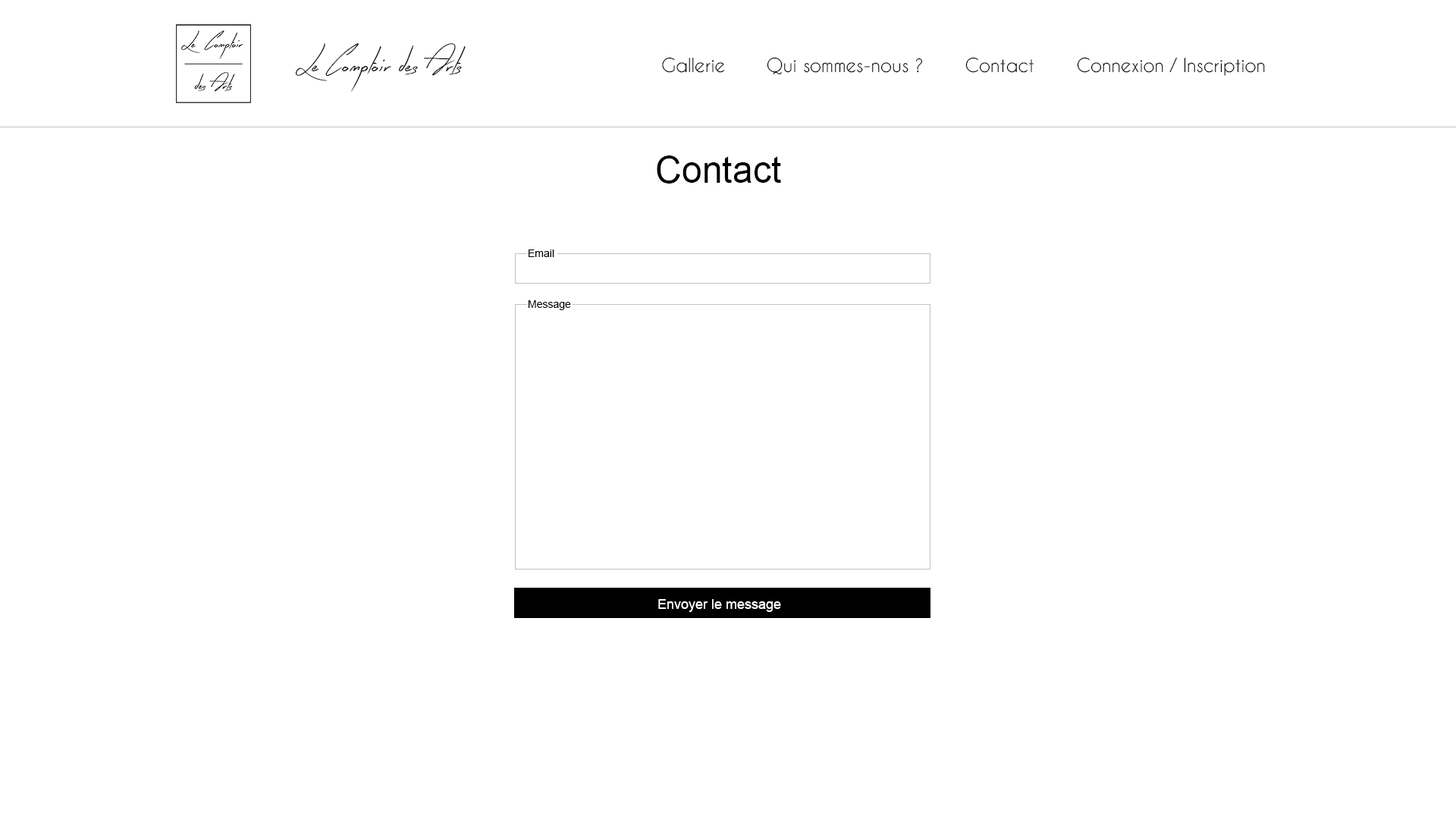
<style>
.page{position:relative;width:1456px;height:819px;background:#ffffff}
.page>*{position:absolute;margin:0}
.t1{font:33.4px "EarlyBird";color:#000000}
.t2{font:18.2px "CaviarDreams";color:#000000}
.t3{font:36.4px "ArialMT";color:#000000}
.t4{font:10.6px "ArialMT";color:#000000}
.t5{font:13.6px "ArialMT";color:#ffffff}
</style>
<div class="page">
<p class="t1" style="left:295px;top:43px;width:171px;height:49px">Le Comptoir des Arts</p>
<p class="t2" style="left:662px;top:57px;width:63px;height:16px">Gallerie</p>
<p class="t2" style="left:767px;top:57px;width:156px;height:18px">Qui sommes-nous ?</p>
<p class="t2" style="left:965px;top:57px;width:69px;height:16px">Contact</p>
<p class="t2" style="left:1077px;top:57px;width:188px;height:19px">Connexion / Inscription</p>
<p class="t3" style="left:657px;top:155px;width:124px;height:29px">Contact</p>
<p class="t4" style="left:529px;top:249px;width:25px;height:8px">Email</p>
<p class="t4" style="left:528px;top:300px;width:43px;height:10px">Message</p>
<p class="t5" style="left:658px;top:599px;width:123px;height:13px">Envoyer le message</p>
</div>
